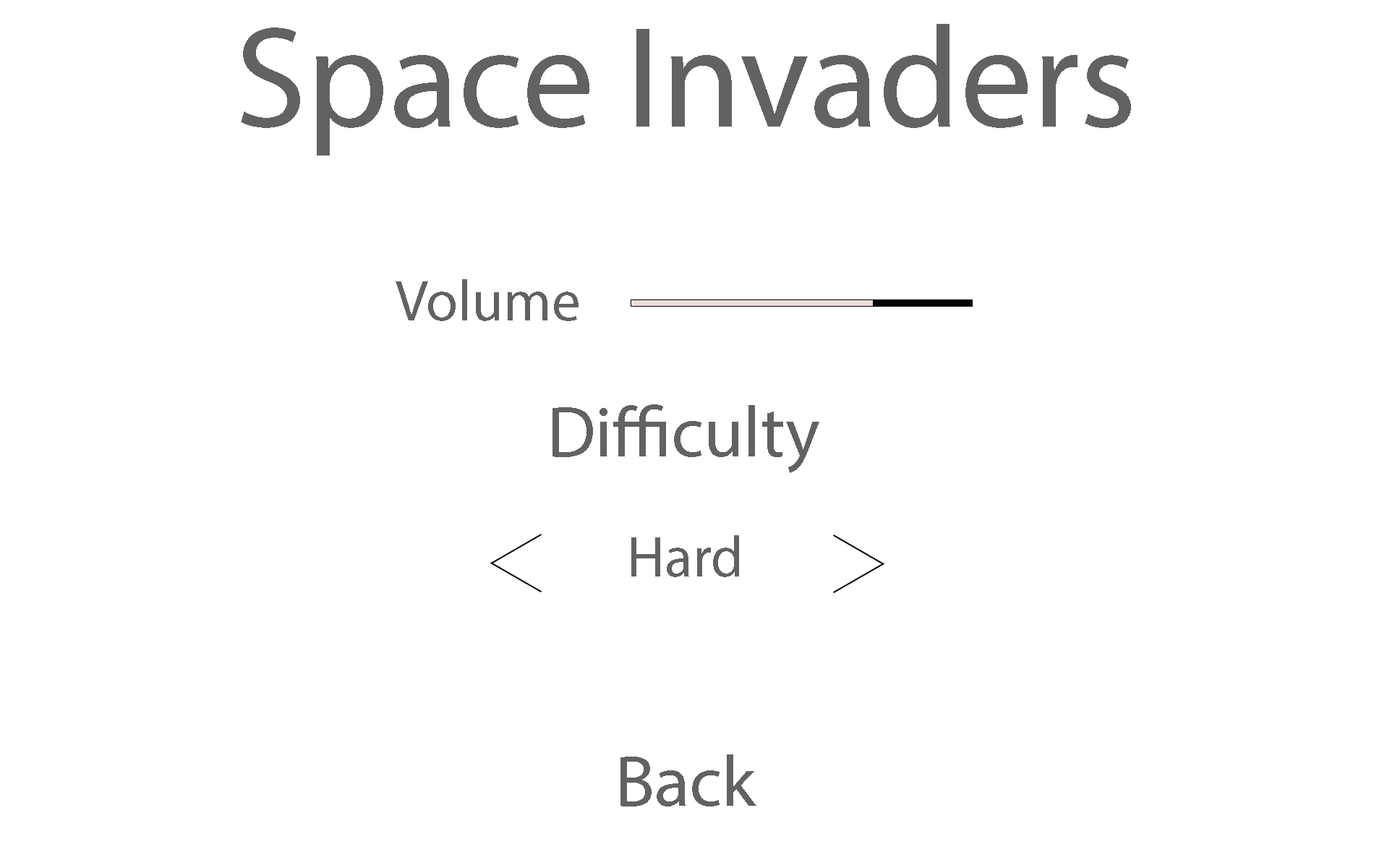
<style>
.page{position:relative;width:1374px;height:868px;background:#ffffff}
.page>*{position:absolute;margin:0}
.t1{font:144.6px "MyriadPro-Regular";color:#626262}
.t2{font:57.9px "MyriadPro-Regular";color:#626262}
.t3{font:72.3px "MyriadPro-Regular";color:#626262}
</style>
<div class="page">
<p class="t1" style="left:241px;top:24px;width:890px;height:131px">Space Invaders</p>
<p class="t2" style="left:396px;top:279px;width:183px;height:42px">Volume</p>
<p class="t3" style="left:553px;top:404px;width:266px;height:69px">Difficulty</p>
<p class="t2" style="left:631px;top:535px;width:108px;height:42px">Hard</p>
<p class="t3" style="left:620px;top:754px;width:136px;height:52px">Back</p>
</div>
